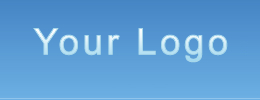
<style>
.page{position:relative;width:260px;height:100px}
.page>*{position:absolute;margin:0}
.t1{font:36px "ArialMT";letter-spacing:0.08em;font-weight:bold}
</style>
<div class="page">
<p class="t1" style="left:33px;top:28px;width:195px;height:35px">Your Logo</p>
</div>
